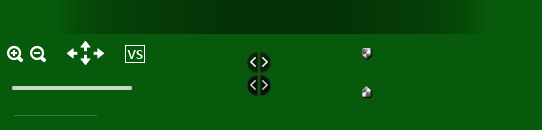
<style>
.page{position:relative;width:542px;height:130px;background:#075a0b}
.page>*{position:absolute;margin:0}
.t1{font:16px "MicrosoftYaHei";color:#ffffff}
</style>
<div class="page">
<p class="t1" style="left:127px;top:50px;width:16px;height:9px">vs</p>
</div>
